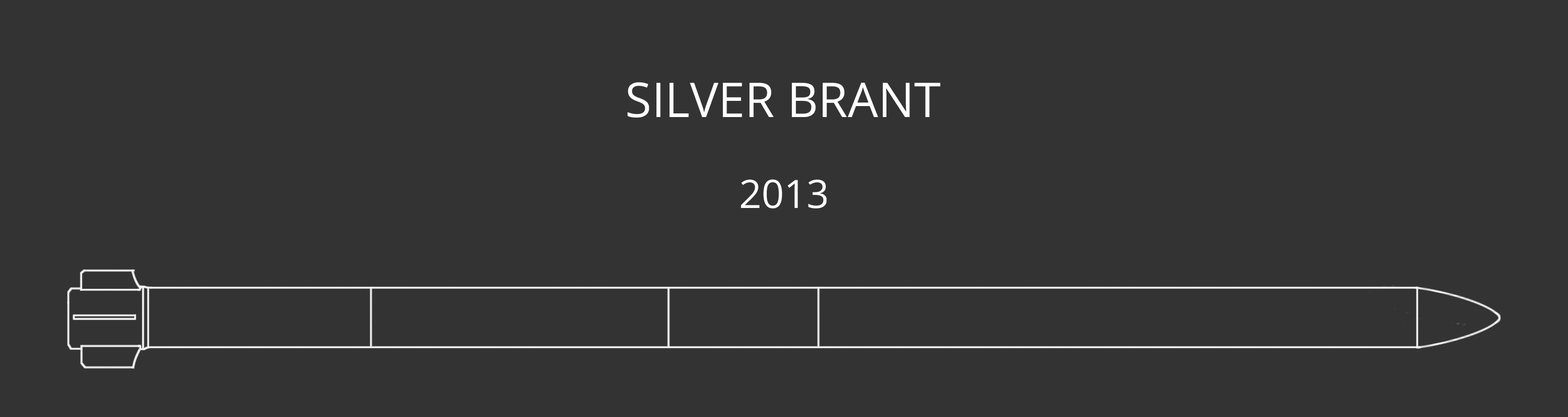
<style>
.page{position:relative;width:1568px;height:417px;background:#333333}
.page>*{position:absolute;margin:0}
.t1{font:47.9px "OpenSans";color:#ffffff}
.t2{font:39.2px "OpenSans";color:#ffffff}
</style>
<div class="page">
<p class="t1" style="left:627px;top:82px;width:313px;height:36px">SILVER BRANT</p>
<p class="t2" style="left:741px;top:179px;width:86px;height:30px">2013</p>
</div>
